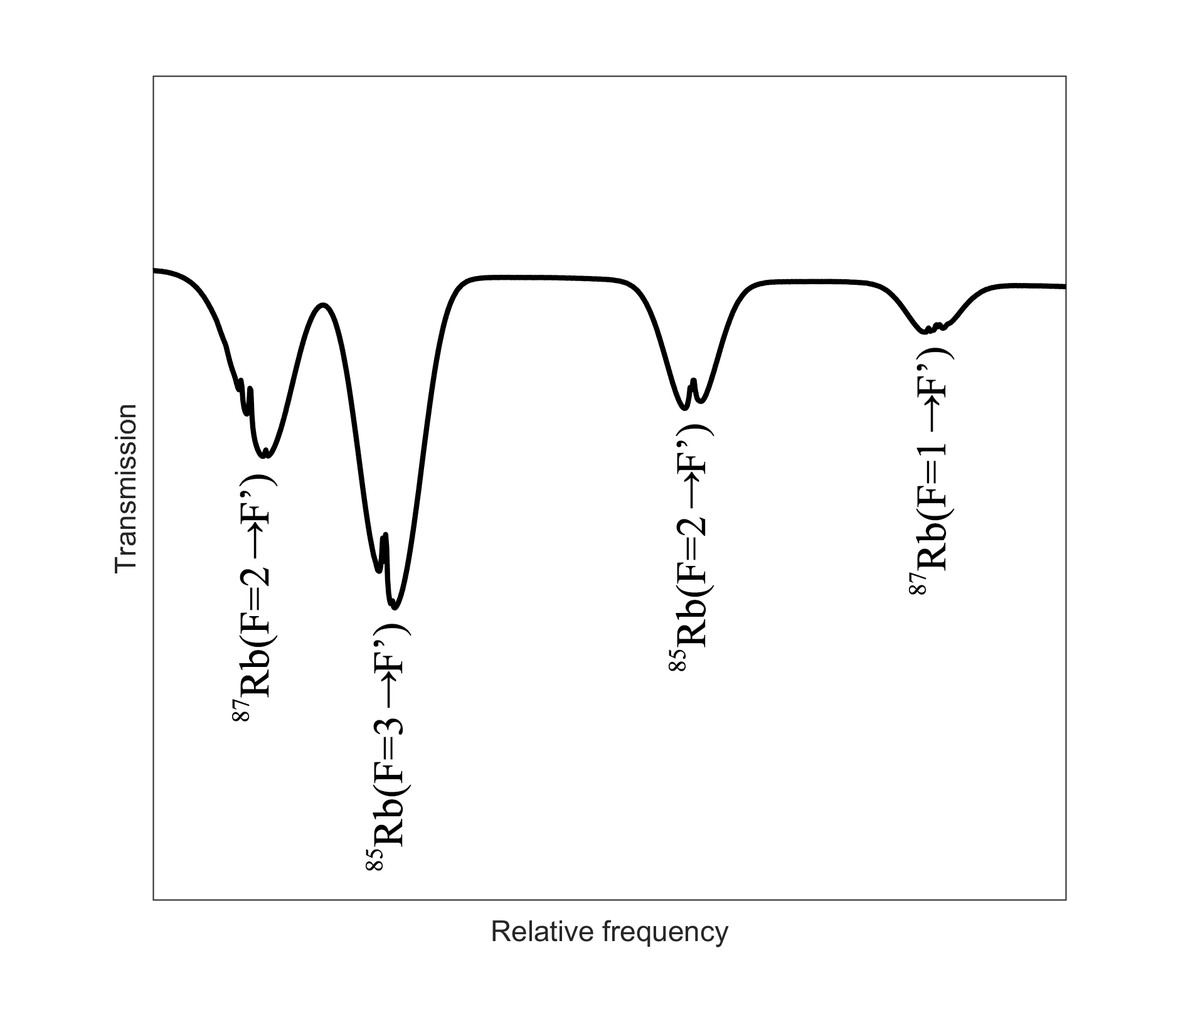
<style>
.page{position:relative;width:1178px;height:1012px;background:#ffffff}
.page>*{position:absolute;margin:0}
.t1{font:41.8px "TimesNewRomanPSMT";letter-spacing:-0.02em;color:#000000;font-weight:bold}
</style>
<div class="page">
<p class="t1" style="left:909px;top:348px;width:46px;height:247px;rotate:180deg">87Rb(F=1↓F’)</p>
<p class="t1" style="left:669px;top:424px;width:46px;height:247px;rotate:180deg">85Rb(F=2↓F’)</p>
<p class="t1" style="left:232px;top:474px;width:46px;height:248px;rotate:180deg">87Rb(F=2↓F’)</p>
<p class="t1" style="left:366px;top:624px;width:46px;height:247px;rotate:180deg">85Rb(F=3↓F’)</p>
</div>
